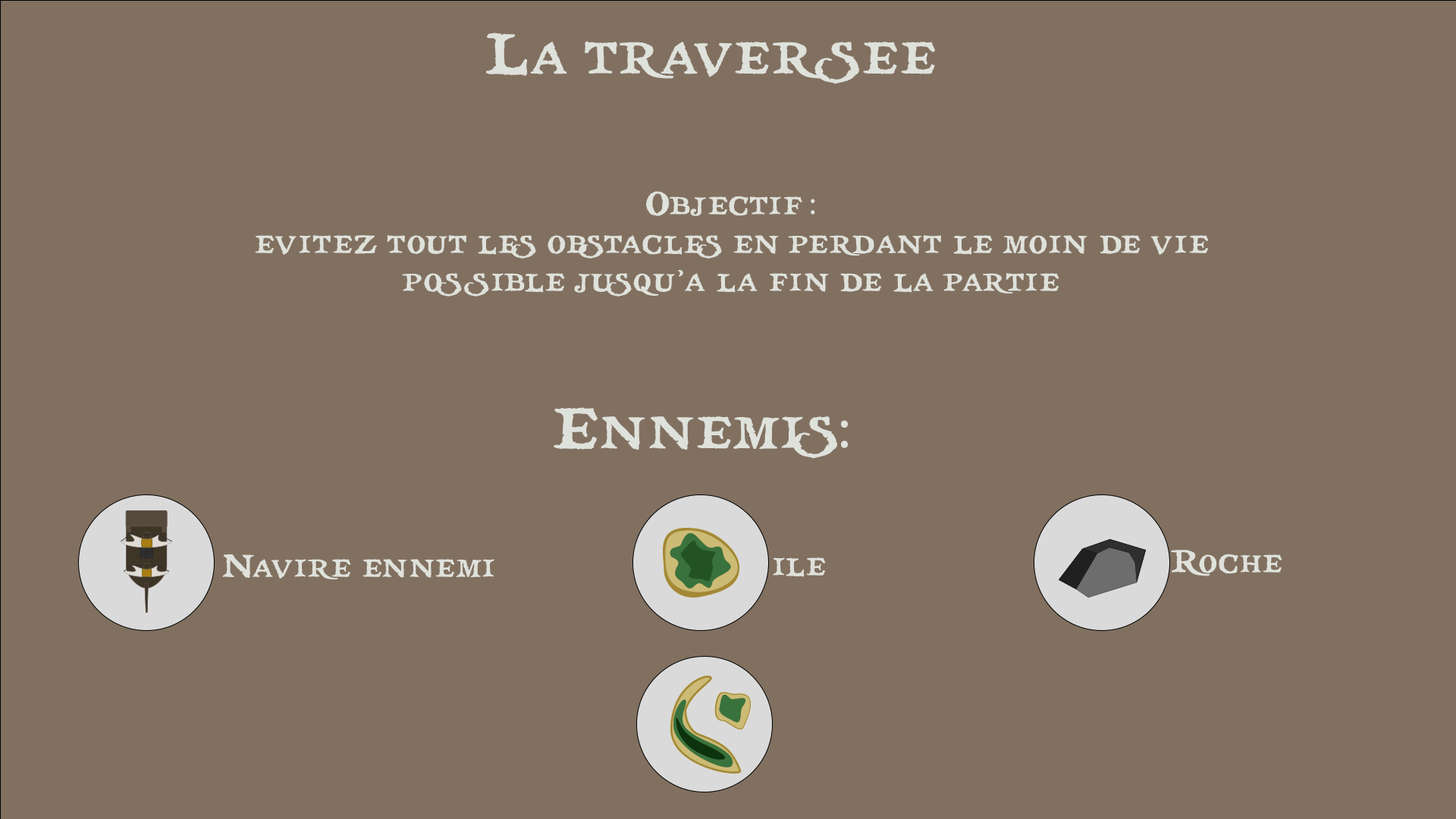
<style>
.page{position:relative;width:1456px;height:819px;background:#817060}
.page>*{position:absolute;margin:0}
.t1{font:57.6px "treasuremap";color:#dfe1db}
.t2{font:31.8px "treasuremap";color:#dfe1db}
.t3{font:31.8px "MyriadPro-Regular";color:#dfe1db}
.t4{font:57.6px "MyriadPro-Regular";color:#dfe1db}
</style>
<div class="page">
<p class="t1" style="left:486px;top:33px;width:449px;height:51px">La traversee</p>
<p class="t2" style="left:255px;top:191px;width:954px;height:106px;text-align:center">Objectif<span class="t3"> : <br></span>evitez tout les obstacles en perdant le moin de vie possible jusqu’a la fin de la partie</p>
<p class="t1" style="left:554px;top:407px;width:294px;height:52px">Ennemis<span class="t4">:</span></p>
<p class="t2" style="left:222px;top:554px;width:272px;height:25px">Navire ennemi</p>
<p class="t2" style="left:773px;top:557px;width:53px;height:20px">ile</p>
<p class="t2" style="left:1171px;top:550px;width:111px;height:26px">Roche</p>
</div>
